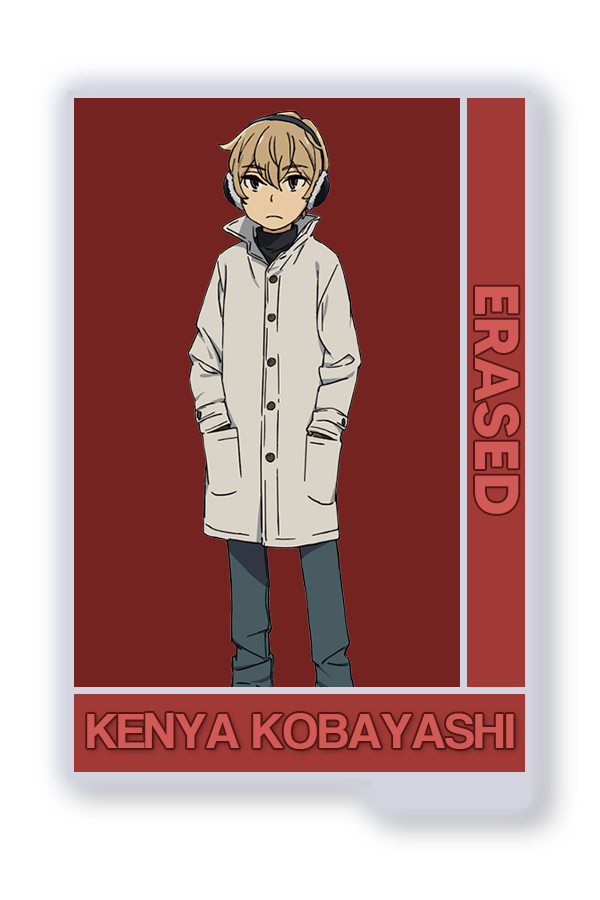
<style>
.page{position:relative;width:600px;height:900px;background:#742320}
.page>*{position:absolute;margin:0}
.t1{font:61.9px "MADETOMMY-Bold";color:#d15a56}
.t2{font:51.7px "CoolveticaRg-Regular";color:#d15a56}
</style>
<div class="page">
<p class="t1" style="left:474px;top:286px;width:45px;height:228px;rotate:90deg">ERASED</p>
<p class="t2" style="left:87px;top:713px;width:427px;height:36px">KENYA KOBAYASHI</p>
</div>
